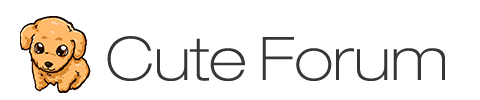
<style>
.page{position:relative;width:480px;height:100px;background:#ffffff}
.page>*{position:absolute;margin:0}
.t1{font:60px "HelveticaNeueLTPro-ThEx";color:#363636}
</style>
<div class="page">
<p class="t1" style="left:107px;top:36px;width:338px;height:45px">Cute Forum</p>
</div>
